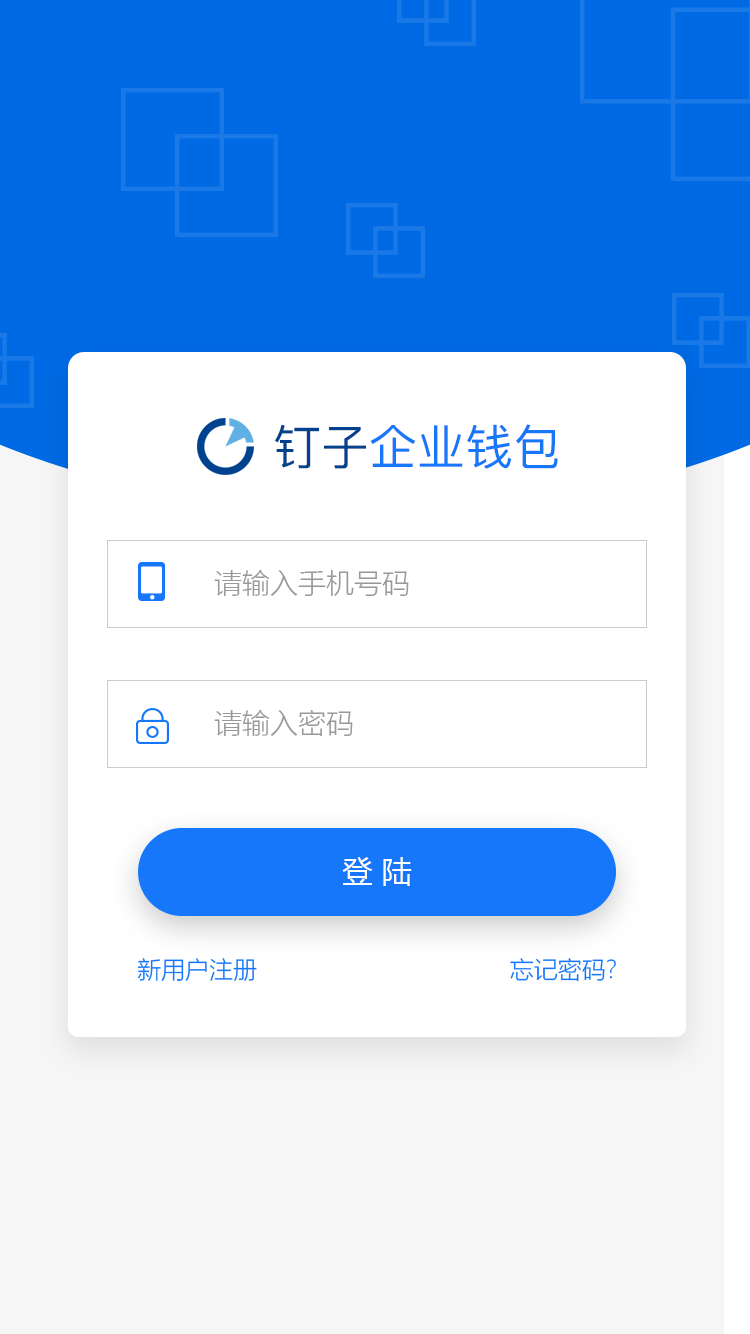
<style>
.page{position:relative;width:750px;height:1334px;background:#ffffff}
.page>*{position:absolute;margin:0}
.t1{font:48px "PingFang-SC-Medium";color:#1777fb}
.t2{font:48px "PingFang-SC-Medium";color:#00428e}
.t3{font:28px "MicrosoftYaHeiLight";color:#999999}
.t4{font:30px "MicrosoftYaHei";color:#ffffff}
.t5{font:24px "MicrosoftYaHeiLight";color:#1777fb}
</style>
<div class="page">
<p class="t1" style="left:274px;top:424px;width:284px;height:45px"><span class="t2">钉子</span>企业钱包</p>
<p class="t3" style="left:214px;top:570px;width:195px;height:26px">请输入手机号码</p>
<p class="t3" style="left:214px;top:710px;width:139px;height:26px">请输入密码</p>
<p class="t4" style="left:342px;top:857px;width:70px;height:29px">登 陆</p>
<p class="t5" style="left:137px;top:958px;width:120px;height:23px">新用户注册</p>
<p class="t5" style="left:510px;top:958px;width:106px;height:24px">忘记密码?</p>
</div>
